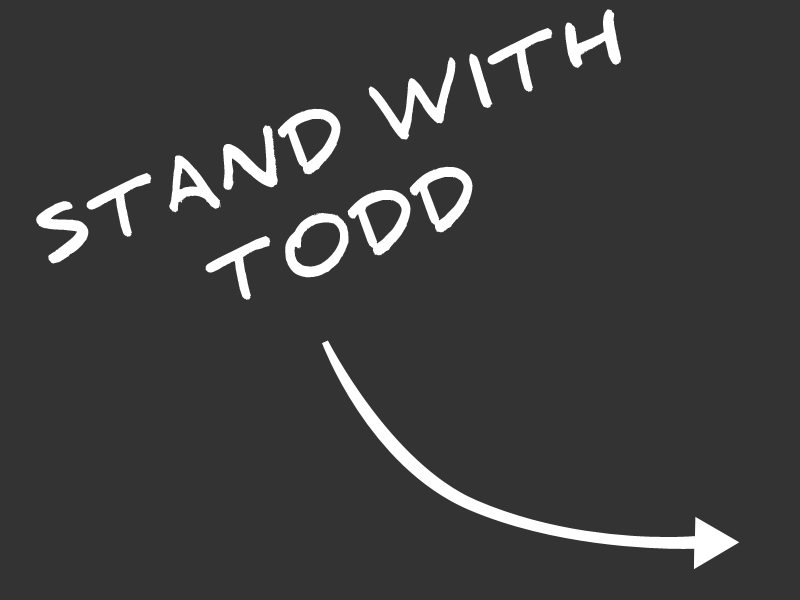
<style>
.page{position:relative;width:800px;height:600px;background:#333333}
.page>*{position:absolute;margin:0}
.t1{font:65px/100px "Daniel-Black";letter-spacing:0.1em;color:#ffffff;text-transform:uppercase}
</style>
<div class="page">
<p class="t1" style="left:36px;top:9px;width:585px;height:291px;text-align:center;rotate:-20deg">stand with<br>todd</p>
</div>
